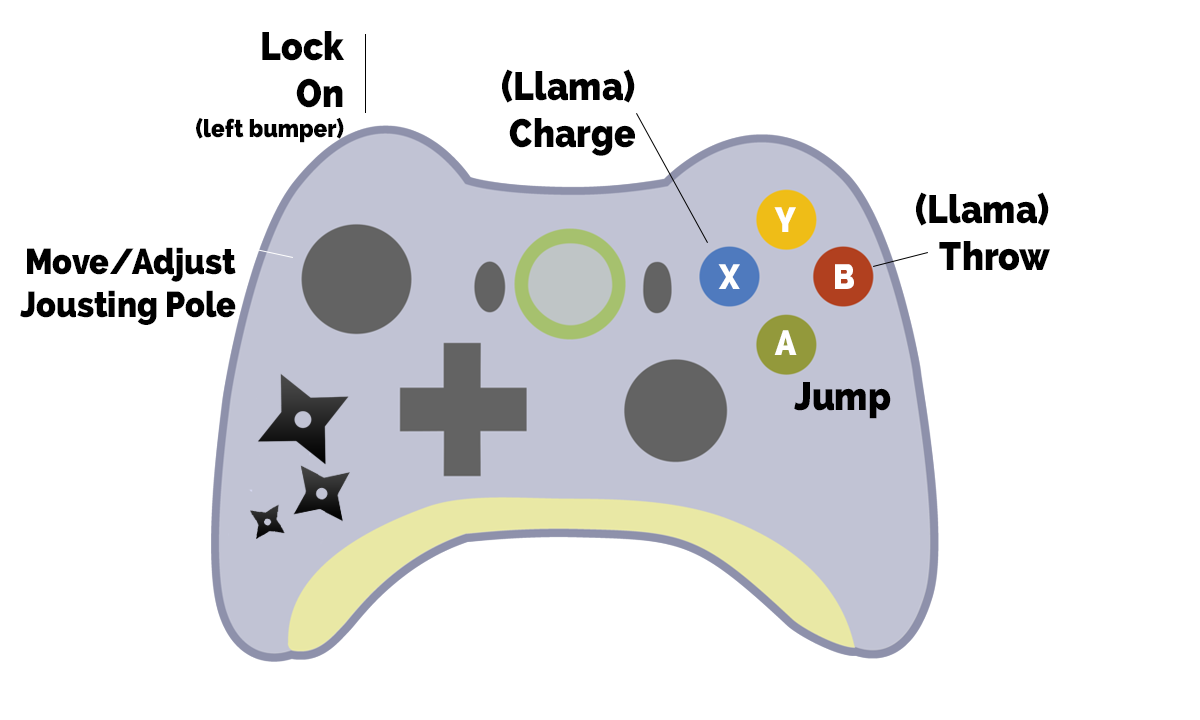
<style>
.page{position:relative;width:1200px;height:720px;background:#ffffff}
.page>*{position:absolute;margin:0}
.t1{font:25px "Raleway-Heavy";color:#000000;scale:0.9 1}
.t2{font:39.5px "Raleway-Heavy";color:#000000;scale:0.9 1}
.t3{font:34.9px "Raleway-Heavy";color:#ffffff;scale:0.9 1}
.t4{font:35.8px "Raleway-Heavy";color:#000000;scale:0.9 1}
</style>
<div class="page">
<p class="t1" style="left:196px;top:31px;width:149px;height:112px;text-align:right"><span class="t2">Lock<br>On</span><br>(left bumper)</p>
<p class="t2" style="left:502px;top:69px;width:133px;height:87px;text-align:right">(Llama)<br>Charge</p>
<p class="t2" style="left:916px;top:192px;width:134px;height:79px;text-align:right">(Llama)<br>Throw</p>
<p class="t3" style="left:774px;top:207px;width:22px;height:25px">Y</p>
<p class="t4" style="left:20px;top:247px;width:216px;height:78px;text-align:right">Move/Adjust<br>Jousting Pole</p>
<p class="t3" style="left:718px;top:264px;width:22px;height:25px">X</p>
<p class="t3" style="left:835px;top:264px;width:19px;height:25px">B</p>
<p class="t3" style="left:774px;top:330px;width:23px;height:25px">A</p>
<p class="t2" style="left:794px;top:382px;width:97px;height:37px">Jump</p>
</div>
